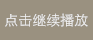
<style>
.page{position:relative;width:93px;height:40px;background:#9a9180}
.page>*{position:absolute;margin:0}
.t1{font:14px "STHeitiTC-Light";color:#f2f2f1}
</style>
<div class="page">
<p class="t1" style="left:5px;top:13px;width:83px;height:14px">点击继续播放</p>
</div>
